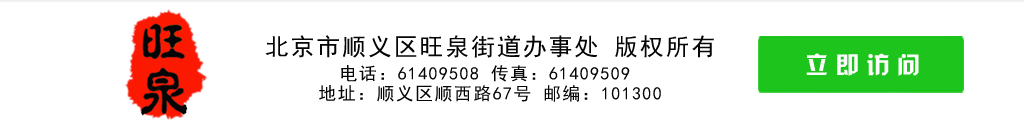
<style>
.page{position:relative;width:1024px;height:128px;background:#fefffe}
.page>*{position:absolute;margin:0}
.t1{font:18px/20px "SimHei";letter-spacing:0.075em;color:#050505}
.t2{font:24px/30px "SimHei";letter-spacing:0.075em;color:#050505}
.t3{font:23.5px "HYk2gj";letter-spacing:0.3em;color:#fdfcfc}
</style>
<div class="page">
<p class="t1" style="left:265px;top:35px;width:449px;height:67px;text-align:center"><span class="t2">北京市顺义区旺泉街道办事处 版权所有<br></span>电话：61409508 传真：61409509 <br>地址：顺义区顺西路67号 邮编：101300</p>
<p class="t3" style="left:806px;top:53px;width:113px;height:23px">立即访问</p>
</div>
